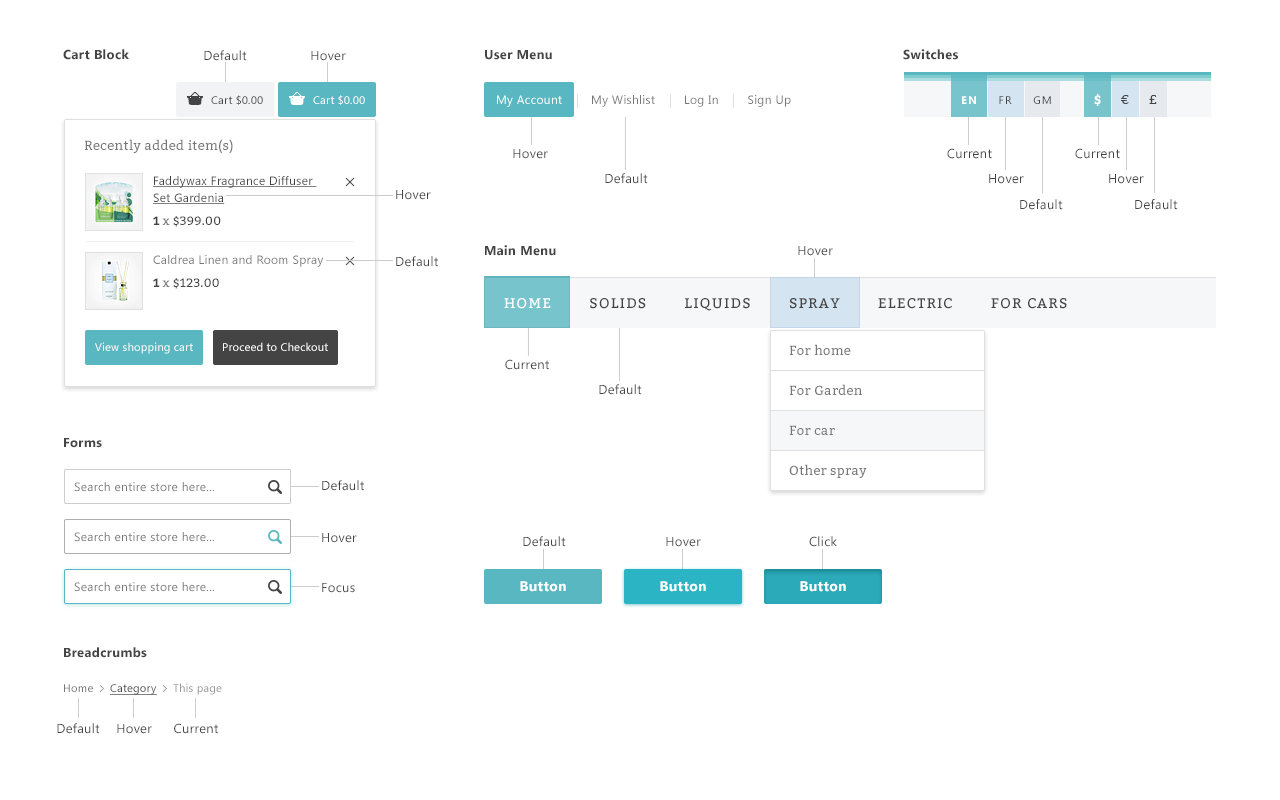
<style>
.page{position:relative;width:1280px;height:800px;background:#ffffff}
.page>*{position:absolute;margin:0}
.t1{font:13px "SegoeUI-Bold";letter-spacing:0.025em;color:#444444}
.t2{font:13px "SegoeUI";letter-spacing:0.025em;color:#444444}
.t3{font:11px "SegoeUI";letter-spacing:0.025em;color:#444444}
.t4{font:11px "SegoeUI";letter-spacing:0.025em;color:#fefefe}
.t5{font:12px "SegoeUI";letter-spacing:0.025em;color:#777777}
.t6{font:12px "SegoeUI";letter-spacing:0.025em;color:#ffffff}
.t7{font:11px "SegoeUI";letter-spacing:0.1em;color:#444444}
.t8{font:11px "SegoeUI-Bold";letter-spacing:0.1em;color:#ffffff}
.t9{font:13px "Bitter-Regular";letter-spacing:0.118em;color:#444444}
.t10{font:13px "Bitter-Bold";letter-spacing:0.118em;color:#ffffff}
.t11{font:13px "Bitter-Regular";letter-spacing:0.025em;color:#777777}
.t12{font:12px/17px "SegoeUI";letter-spacing:0.025em;color:#444444;text-decoration:underline}
.t13{font:12px "Bitter-Regular";letter-spacing:0.025em;color:#444444}
.t14{font:12px "Bitter-Bold";letter-spacing:0.025em;color:#444444}
.t15{font:12px "Bitter-Regular";letter-spacing:0.025em;color:#777777}
.t16{font:14px "Bitter-Regular";letter-spacing:0.1em;color:#444444;text-transform:uppercase}
.t17{font:14px "Bitter-Regular";letter-spacing:0.1em;color:#ffffff;text-transform:uppercase}
.t18{font:14px "SegoeUI-Bold";letter-spacing:0.025em;color:#fefefe}
.t19{font:11px "SegoeUI";letter-spacing:0.025em;color:#999999}
.t20{font:11px "SegoeUI";letter-spacing:0.025em;color:#777777}
.t21{font:11px "SegoeUI";letter-spacing:0.025em;color:#444444;text-decoration:underline}
</style>
<div class="page">
<p class="t1" style="left:63px;top:49px;width:66px;height:11px">Cart Block</p>
<p class="t2" style="left:204px;top:50px;width:43px;height:11px">Default</p>
<p class="t2" style="left:311px;top:51px;width:35px;height:10px">Hover</p>
<p class="t1" style="left:485px;top:50px;width:67px;height:10px">User Menu</p>
<p class="t1" style="left:903px;top:49px;width:55px;height:11px">Switches</p>
<p class="t3" style="left:211px;top:95px;width:52px;height:10px">Cart $0.00</p>
<p class="t4" style="left:313px;top:95px;width:52px;height:10px">Cart $0.00</p>
<p class="t5" style="left:497px;top:95px;width:294px;height:12px"><span class="t6">My Account </span>       My Wishlist        Log In        Sign Up</p>
<p class="t7" style="left:962px;top:96px;width:89px;height:8px"><span class="t8">EN     </span>FR     GM</p>
<p class="t9" style="left:1094px;top:93px;width:63px;height:14px"><span class="t10">$    </span>€    £</p>
<p class="t11" style="left:84px;top:139px;width:149px;height:14px">Recently added item(s)</p>
<p class="t2" style="left:513px;top:149px;width:35px;height:10px">Hover</p>
<p class="t2" style="left:947px;top:148px;width:45px;height:11px">Current</p>
<p class="t2" style="left:1075px;top:148px;width:45px;height:11px">Current</p>
<p class="t2" style="left:605px;top:173px;width:43px;height:11px">Default</p>
<p class="t2" style="left:989px;top:174px;width:35px;height:10px">Hover</p>
<p class="t2" style="left:1109px;top:174px;width:35px;height:10px">Hover</p>
<p class="t12" style="left:153px;top:176px;width:164px;height:28px">Faddywax Fragrance Diffuser <br>Set Gardenia</p>
<p class="t2" style="left:396px;top:190px;width:35px;height:10px">Hover</p>
<p class="t2" style="left:1020px;top:199px;width:43px;height:11px">Default</p>
<p class="t2" style="left:1135px;top:199px;width:43px;height:11px">Default</p>
<p class="t13" style="left:153px;top:216px;width:68px;height:11px"><span class="t14">1</span><span class="t15"> x </span>$399.00</p>
<p class="t1" style="left:485px;top:245px;width:71px;height:11px">Main Menu</p>
<p class="t2" style="left:798px;top:246px;width:35px;height:10px">Hover</p>
<p class="t5" style="left:153px;top:255px;width:171px;height:12px">Caldrea Linen and Room Spray</p>
<p class="t2" style="left:396px;top:256px;width:42px;height:11px">Default</p>
<p class="t13" style="left:153px;top:278px;width:66px;height:11px"><span class="t14">1</span><span class="t15"> x </span>$123.00</p>
<p class="t16" style="left:504px;top:298px;width:563px;height:13px"><span class="t17">Home</span>        Solids        Liquids        Spray        Electric        For cars</p>
<p class="t4" style="left:95px;top:342px;width:98px;height:12px">View shopping cart</p>
<p class="t4" style="left:223px;top:342px;width:105px;height:9px">Proceed to Checkout</p>
<p class="t11" style="left:789px;top:344px;width:62px;height:11px">For home</p>
<p class="t2" style="left:505px;top:359px;width:44px;height:11px">Current</p>
<p class="t2" style="left:599px;top:384px;width:43px;height:11px">Default</p>
<p class="t11" style="left:789px;top:384px;width:73px;height:11px">For Garden</p>
<p class="t11" style="left:789px;top:425px;width:46px;height:10px">For car</p>
<p class="t1" style="left:64px;top:438px;width:38px;height:10px">Forms</p>
<p class="t11" style="left:789px;top:464px;width:78px;height:14px">Other spray</p>
<p class="t5" style="left:74px;top:482px;width:140px;height:10px">Search entire store here...</p>
<p class="t2" style="left:322px;top:480px;width:42px;height:11px">Default</p>
<p class="t5" style="left:74px;top:532px;width:140px;height:10px">Search entire store here...</p>
<p class="t2" style="left:322px;top:533px;width:35px;height:10px">Hover</p>
<p class="t2" style="left:523px;top:536px;width:43px;height:11px">Default</p>
<p class="t2" style="left:666px;top:537px;width:35px;height:10px">Hover</p>
<p class="t2" style="left:809px;top:536px;width:28px;height:11px">Click</p>
<p class="t5" style="left:74px;top:582px;width:140px;height:10px">Search entire store here...</p>
<p class="t18" style="left:520px;top:581px;width:46px;height:11px">Button</p>
<p class="t18" style="left:660px;top:581px;width:46px;height:11px">Button</p>
<p class="t18" style="left:800px;top:581px;width:46px;height:11px">Button</p>
<p class="t2" style="left:322px;top:583px;width:33px;height:10px">Focus</p>
<p class="t1" style="left:64px;top:647px;width:83px;height:11px">Breadcrumbs</p>
<p class="t19" style="left:64px;top:683px;width:158px;height:12px"><span class="t20">Home     </span><span class="t21">Category     </span>This page</p>
<p class="t2" style="left:57px;top:723px;width:43px;height:11px">Default</p>
<p class="t2" style="left:117px;top:724px;width:35px;height:10px">Hover</p>
<p class="t2" style="left:174px;top:723px;width:44px;height:11px">Current</p>
</div>
